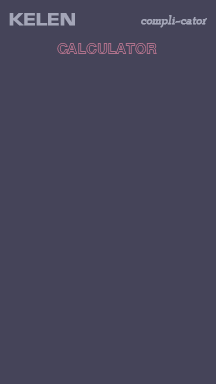
<style>
.page{position:relative;width:216px;height:384px;background:#454459}
.page>*{position:absolute;margin:0}
.t1{font:18.2px "EurostileBold";color:#a4a6b8;font-weight:bold;scale:1.2 1}
.t2{font:12.8px "PoorRichard-Regular";color:#a4a6b8;font-weight:bold;font-style:italic}
.t3{font:14.7px "HelveticaNeueLTPro-BdOu";color:#b0728c}
</style>
<div class="page">
<p class="t1" style="left:9px;top:13px;width:66px;height:13px">KELEN</p>
<p class="t2" style="left:141px;top:15px;width:66px;height:13px">compli-cator</p>
<p class="t3" style="left:57px;top:43px;width:100px;height:11px">CALCULATOR</p>
</div>
